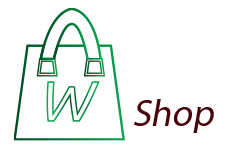
<style>
.page{position:relative;width:250px;height:150px;background:#ffffff}
.page>*{position:absolute;margin:0}
.t1{font:37.5px "MyriadPro-Regular";color:#48020a;font-style:italic}
</style>
<div class="page">
<p class="t1" style="left:133px;top:99px;width:81px;height:34px">Shop</p>
</div>
